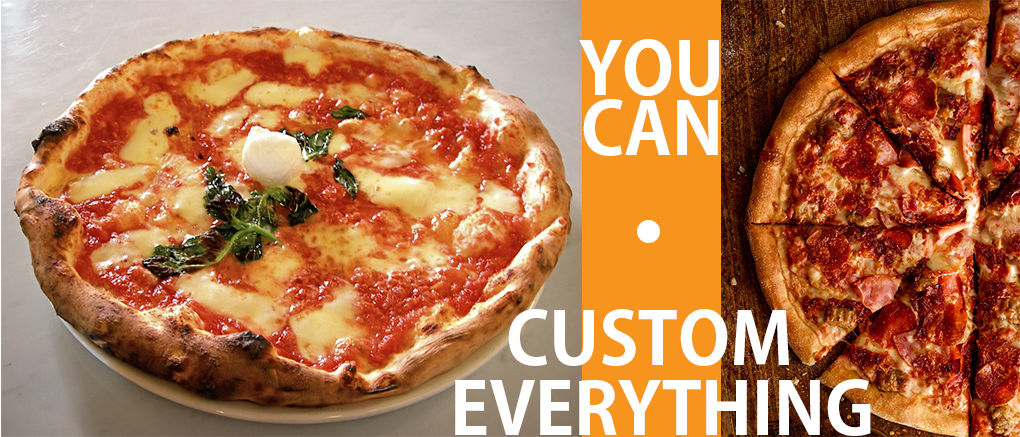
<style>
.page{position:relative;width:1020px;height:437px}
.page>*{position:absolute;margin:0}
.t1{font:72px "AdobeGothicStd-Bold";color:#ffffff}
</style>
<div class="page">
<p class="t1" style="left:579px;top:39px;width:140px;height:57px">YOU</p>
<p class="t1" style="left:583px;top:99px;width:135px;height:57px">CAN</p>
<p class="t1" style="left:508px;top:309px;width:281px;height:57px">CUSTOM</p>
<p class="t1" style="left:455px;top:379px;width:416px;height:57px">EVERYTHING</p>
</div>
